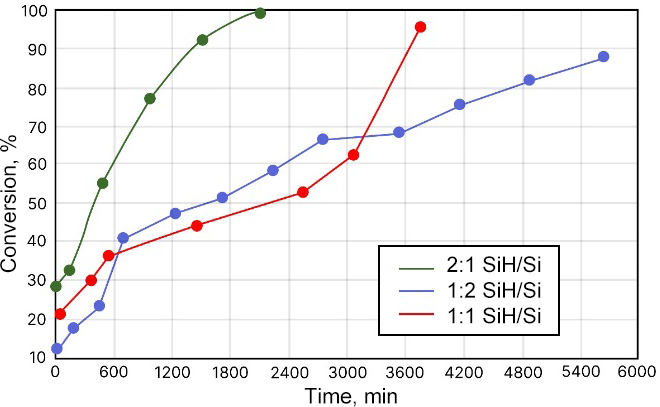
<style>
.page{position:relative;width:660px;height:407px;background:#ffffff}
.page>*{position:absolute;margin:0}
.t1{font:21.4px "ArialMT";color:#000000}
</style>
<div class="page">
<p class="t1" style="left:0px;top:135px;width:19px;height:138px;rotate:-90deg">Conversion, %</p>
<p class="t1" style="left:447px;top:256px;width:94px;height:68px;text-align:center">2:1 SiH/Si<br>1:2 SiH/Si<br>1:1 SiH/Si</p>
<p class="t1" style="left:304px;top:388px;width:93px;height:19px">Time, min</p>
</div>
